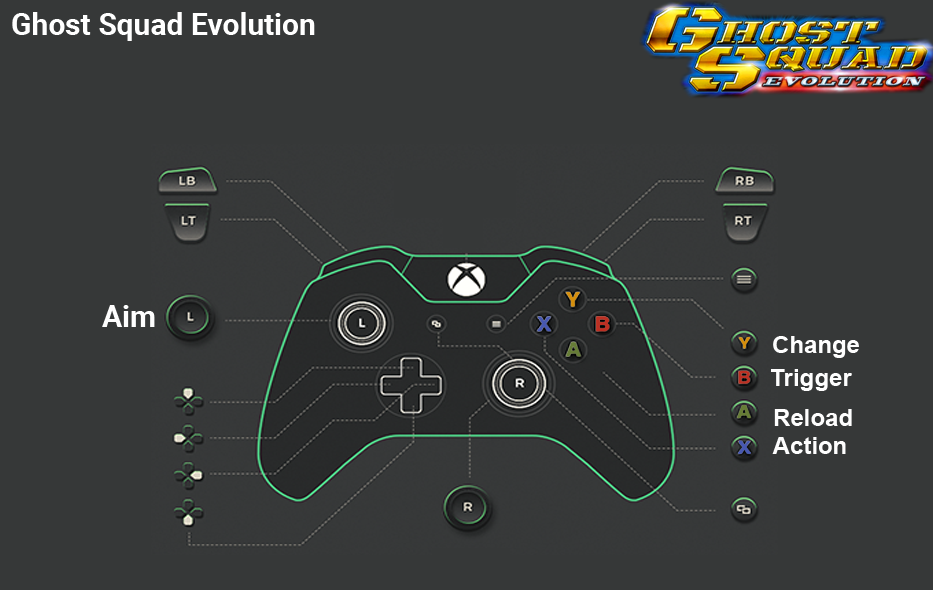
<style>
.page{position:relative;width:933px;height:590px;background:#363838}
.page>*{position:absolute;margin:0}
.t1{font:30px "Roboto-Bold";color:#ffffff}
.t2{font:30px "Roboto-Bold";color:#fefefe}
.t3{font:24px "Arial-BoldMT";color:#fefefe}
</style>
<div class="page">
<p class="t1" style="left:12px;top:12px;width:303px;height:29px">Ghost Squad Evolution</p>
<p class="t2" style="left:102px;top:305px;width:53px;height:22px">Aim</p>
<p class="t3" style="left:773px;top:336px;width:86px;height:22px">Change</p>
<p class="t3" style="left:771px;top:369px;width:81px;height:22px">Trigger</p>
<p class="t3" style="left:774px;top:409px;width:78px;height:17px">Reload</p>
<p class="t3" style="left:772px;top:437px;width:74px;height:17px">Action</p>
</div>
